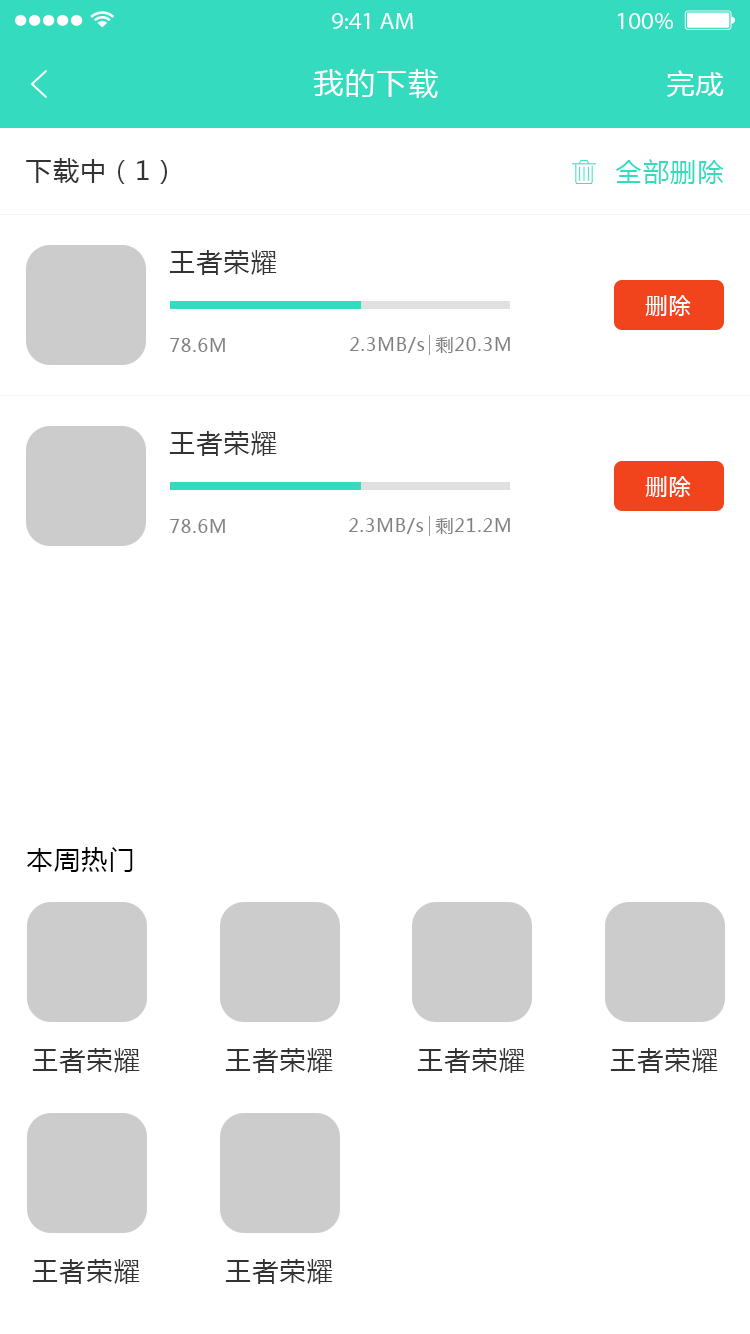
<style>
.page{position:relative;width:750px;height:1334px;background:#ffffff}
.page>*{position:absolute;margin:0}
.t1{font:30px "MicrosoftYaHei";letter-spacing:0.05em;color:#ffffff}
.t2{font:28px "MicrosoftYaHei";letter-spacing:0.05em;color:#ffffff}
.t3{font:26px "MicrosoftYaHei";letter-spacing:0.05em;color:#333333}
.t4{font:26px "MicrosoftYaHei";letter-spacing:0.05em;color:#34dbbf}
.t5{font:22px "MicrosoftYaHei";letter-spacing:0.05em;color:#ffffff}
.t6{font:18px "MicrosoftYaHei";letter-spacing:0.05em;color:#808080}
.t7{font:26px "MicrosoftYaHei";letter-spacing:0.05em;color:#000000}
</style>
<div class="page">
<p class="t1" style="left:313px;top:69px;width:125px;height:29px">我的下载</p>
<p class="t2" style="left:667px;top:70px;width:57px;height:27px">完成</p>
<p class="t3" style="left:26px;top:158px;width:141px;height:26px">下载中（1）</p>
<p class="t4" style="left:615px;top:159px;width:109px;height:25px">全部删除</p>
<p class="t3" style="left:169px;top:250px;width:108px;height:25px">王者荣耀</p>
<p class="t5" style="left:645px;top:295px;width:46px;height:21px">删除</p>
<p class="t6" style="left:170px;top:338px;width:55px;height:14px">78.6M</p>
<p class="t6" style="left:350px;top:337px;width:75px;height:16px">2.3MB/s</p>
<p class="t6" style="left:435px;top:337px;width:75px;height:16px">剩20.3M</p>
<p class="t3" style="left:169px;top:431px;width:108px;height:25px">王者荣耀</p>
<p class="t5" style="left:645px;top:476px;width:46px;height:21px">删除</p>
<p class="t6" style="left:170px;top:519px;width:55px;height:14px">78.6M</p>
<p class="t6" style="left:349px;top:518px;width:75px;height:16px">2.3MB/s</p>
<p class="t6" style="left:435px;top:518px;width:75px;height:16px">剩21.2M</p>
<p class="t7" style="left:27px;top:847px;width:106px;height:25px">本周热门</p>
<p class="t3" style="left:32px;top:1048px;width:108px;height:25px">王者荣耀</p>
<p class="t3" style="left:225px;top:1048px;width:108px;height:25px">王者荣耀</p>
<p class="t3" style="left:417px;top:1048px;width:108px;height:25px">王者荣耀</p>
<p class="t3" style="left:610px;top:1048px;width:108px;height:25px">王者荣耀</p>
<p class="t3" style="left:32px;top:1259px;width:108px;height:25px">王者荣耀</p>
<p class="t3" style="left:225px;top:1259px;width:108px;height:25px">王者荣耀</p>
</div>
